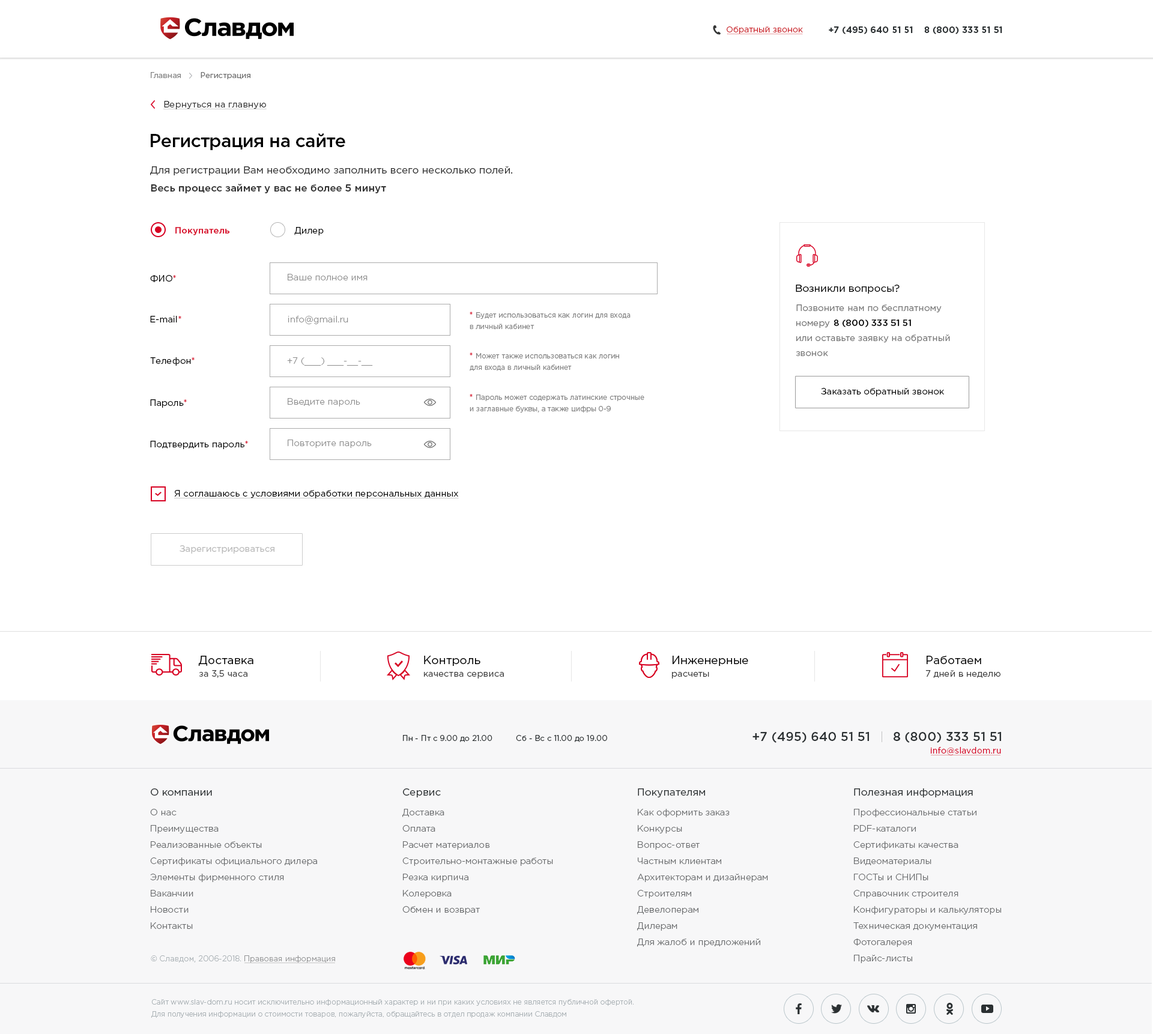
<style>
.page{position:relative;width:1153px;height:1034px;background:#ffffff}
.page>*{position:absolute;margin:0}
.t1{font:8.4px "GothamPro";color:#cc2229}
.t2{font:9px "GothamPro-Bold";color:#2b3032}
.t3{font:7.8px "GothamPro";color:#6a6a6a}
.t4{font:7.8px "GothamPro";color:#818181}
.t5{font:9px "GothamPro";color:#333333;text-decoration:underline}
.t6{font:18.2px "GothamPro-Medium";letter-spacing:-0.025em;color:#000000}
.t7{font:10.2px/18px "GothamPro";color:#333333}
.t8{font:10.2px/18px "GothamPro-Medium";color:#333333}
.t9{font:9px "GothamPro-Medium";color:#d70022}
.t10{font:9px "GothamPro";color:#000000}
.t11{font:9px "GothamPro";color:#d70022}
.t12{font:9px "GothamPro-Light";color:#8d8d8d}
.t13{font:10.2px "GothamPro";color:#010101}
.t14{font:9px/15px "GothamPro";color:#727272}
.t15{font:7.2px/11.4px "GothamPro";color:#848484}
.t16{font:8.4px/14.4px "GothamPro";color:#d70022}
.t17{font:9px "GothamPro-Medium";color:#000000}
.t18{font:9px "GothamPro";color:#010101;text-decoration:underline}
.t19{font:9px "GothamPro";color:#b8b8b8}
.t20{font:9px/12.8px "GothamPro";color:#3b3b3b}
.t21{font:11.6px/12.8px "GothamPro";color:#000000}
.t22{font:9px/12.8px "GothamPro";color:#3a3a3a}
.t23{font:7.8px "GothamPro";color:#2b3032}
.t24{font:12.6px "GothamPro-Medium";color:#2b3032}
.t25{font:8.4px "GothamPro";letter-spacing:0.015em;color:#d70022}
.t26{font:10.2px "GothamPro";color:#2b3032}
.t27{font:9px/16.2px "GothamPro-Light";color:#67696b}
.t28{font:7.8px "GothamPro-Light"}
.t29{font:7.2px/12px "GothamPro-Light";color:#acb3b7}
</style>
<div class="page">
<p class="t1" style="left:727px;top:26px;width:76px;height:8px">Обратный звонок</p>
<p class="t2" style="left:829px;top:26px;width:173px;height:8px">+7 (495) 640 51 51    8 (800) 333 51 51</p>
<p class="t3" style="left:151px;top:72px;width:99px;height:7px"><span class="t4">Главная        </span>Регистрация</p>
<p class="t5" style="left:163px;top:101px;width:104px;height:8px">Вернуться на главную</p>
<p class="t6" style="left:151px;top:133px;width:194px;height:17px">Регистрация на сайте</p>
<p class="t7" style="left:150px;top:166px;width:362px;height:27px">Для регистрации Вам необходимо заполнить всего несколько полей. <br><span class="t8">Весь процесс займет у вас не более 5 минут</span></p>
<p class="t9" style="left:175px;top:227px;width:149px;height:8px">Покупатель<span class="t10">                        Дилер</span></p>
<p class="t10" style="left:150px;top:275px;width:26px;height:7px">ФИО<span class="t11">*</span></p>
<p class="t12" style="left:288px;top:274px;width:80px;height:6px">Ваше полное имя</p>
<p class="t13" style="left:796px;top:285px;width:104px;height:9px">Возникли вопросы?</p>
<p class="t14" style="left:796px;top:304px;width:146px;height:24px">Позвоните нам по бесплатному <br>номеру</p>
<p class="t10" style="left:150px;top:316px;width:31px;height:6px">E-mail<span class="t11">*</span></p>
<p class="t12" style="left:288px;top:316px;width:60px;height:8px">info@gmail.ru</p>
<p class="t15" style="left:470px;top:312px;width:161px;height:17px"><span class="t16">* </span>Будет использоваться как логин для входа <br>в личный кабинет</p>
<p class="t17" style="left:834px;top:319px;width:77px;height:8px">8 (800) 333 51 51</p>
<p class="t14" style="left:796px;top:335px;width:154px;height:21px">или оставьте заявку на обратный <br>звонок</p>
<p class="t15" style="left:470px;top:353px;width:149px;height:18px"><span class="t16">* </span>Может также использоваться как логин <br>для входа в личный кабинет</p>
<p class="t10" style="left:150px;top:357px;width:45px;height:9px">Телефон<span class="t11">*</span></p>
<p class="t12" style="left:287px;top:357px;width:86px;height:9px">+7 (___) ___-__-__</p>
<p class="t10" style="left:821px;top:388px;width:123px;height:8px">Заказать обратный звонок</p>
<p class="t10" style="left:150px;top:399px;width:37px;height:9px">Пароль<span class="t11">*</span></p>
<p class="t12" style="left:288px;top:398px;width:72px;height:9px">Введите пароль</p>
<p class="t15" style="left:470px;top:394px;width:174px;height:19px"><span class="t16">* </span>Пароль может содержать латинские строчные <br>и заглавные буквы, а также цифры 0-9</p>
<p class="t10" style="left:150px;top:441px;width:98px;height:8px">Подтвердить пароль<span class="t11">*</span></p>
<p class="t12" style="left:288px;top:440px;width:84px;height:8px">Повторите пароль</p>
<p class="t18" style="left:174px;top:490px;width:285px;height:8px">Я соглашаюсь с условиями обработки персональных данных</p>
<p class="t19" style="left:180px;top:545px;width:94px;height:9px">Зарегистрироваться</p>
<p class="t20" style="left:198px;top:656px;width:55px;height:22px"><span class="t21">Доставка <br></span>за 3,5 часа</p>
<p class="t22" style="left:424px;top:656px;width:80px;height:23px"><span class="t21">Контроль <br></span>качества сервиса</p>
<p class="t21" style="left:672px;top:656px;width:76px;height:23px">Инженерные <br><span class="t22">расчеты</span></p>
<p class="t20" style="left:925px;top:656px;width:76px;height:22px"><span class="t21">Работаем<br></span>7 дней в неделю</p>
<p class="t23" style="left:403px;top:735px;width:204px;height:7px">Пн - Пт с 9.00 до 21.00          Сб - Вc с 11.00 до 19.00</p>
<p class="t24" style="left:752px;top:732px;width:249px;height:11px">+7 (495) 640 51 51      8 (800) 333 51 51</p>
<p class="t25" style="left:931px;top:747px;width:70px;height:8px">info@slavdom.ru</p>
<p class="t26" style="left:151px;top:789px;width:61px;height:7px">О компании</p>
<p class="t26" style="left:403px;top:789px;width:38px;height:9px">Сервис</p>
<p class="t26" style="left:638px;top:789px;width:67px;height:9px">Покупателям</p>
<p class="t26" style="left:854px;top:789px;width:119px;height:9px">Полезная информация</p>
<p class="t27" style="left:150px;top:809px;width:167px;height:120px">О нас<br>Преимущества<br>Реализованные объекты<br>Сертификаты официального дилера  <br>Элементы фирменного стиля <br>Ваканчии<br>Новости <br>Контакты</p>
<p class="t27" style="left:402px;top:809px;width:151px;height:106px">Доставка  <br>Оплата  <br>Расчет материалов  <br>Строительно-монтажные работы  <br>Резка кирпича  <br>Колеровка <br>Обмен и возврат</p>
<p class="t27" style="left:637px;top:809px;width:131px;height:138px">Как оформить заказ<br>Конкурсы<br>Вопрос-ответ<br>Частным клиентам <br>Архитекторам и дизайнерам  <br>Строителям <br>Девелоперам<br>Дилерам<br>Для жалоб и предложений</p>
<p class="t27" style="left:853px;top:809px;width:148px;height:154px">Профессиональные статьи<br>PDF-каталоги<br>Сертификаты качества<br>Видеоматериалы<br>ГОСТы и СНИПы<br>Справочник строителя  <br>Конфигураторы и калькуляторы  <br>Техническая документация  <br>Фотогалерея <br>Прайс-листы</p>
<p class="t28" style="left:151px;top:955px;width:184px;height:8px">© Славдом, 2006-2018. Правовая информация</p>
<p class="t29" style="left:151px;top:999px;width:483px;height:19px">Сайт www.slav-dom.ru носит исключительно информационный характер и ни при каких условиях не является публичной офертой. <br>Для получения информации о стоимости товаров, пожалуйста, обращайтесь в отдел продаж компании Славдом</p>
</div>
